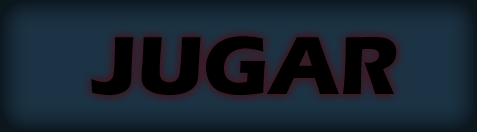
<style>
.page{position:relative;width:477px;height:132px}
.page>*{position:absolute;margin:0}
.t1{font:85px "ErasITC-Bold";color:#000000}
</style>
<div class="page">
<p class="t1" style="left:91px;top:36px;width:306px;height:59px">JUGAR</p>
</div>
